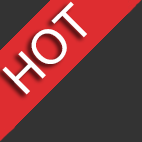
<style>
.page{position:relative;width:142px;height:142px;background:#333333}
.page>*{position:absolute;margin:0}
.t1{font:48px "ArialMT";color:#ffffff}
</style>
<div class="page">
<p class="t1" style="left:2px;top:1px;width:85px;height:94px;rotate:-45deg">HOT</p>
</div>
